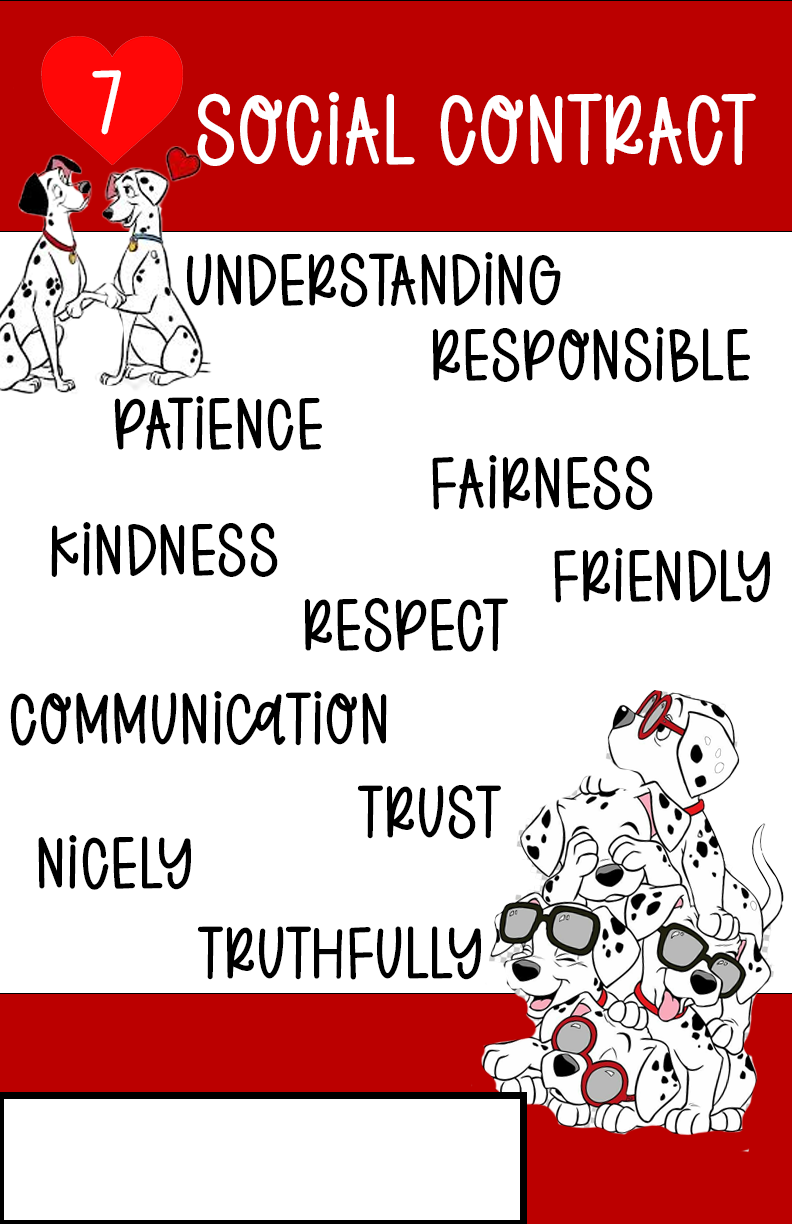
<style>
.page{position:relative;width:792px;height:1224px;background:#ffffff}
.page>*{position:absolute;margin:0}
.t1{font:88.5px "FBCaramelApple";color:#ffffff}
.t2{font:100px "FBCaramelApple";color:#ffffff}
.t3{font:74px "FBCaramelApple";color:#000000}
</style>
<div class="page">
<p class="t1" style="left:92px;top:70px;width:29px;height:65px">7</p>
<p class="t2" style="left:197px;top:92px;width:559px;height:74px">Social Contract</p>
<p class="t3" style="left:187px;top:252px;width:374px;height:55px">Understanding</p>
<p class="t3" style="left:432px;top:327px;width:318px;height:56px">Responsible</p>
<p class="t3" style="left:114px;top:396px;width:208px;height:55px">patience</p>
<p class="t3" style="left:432px;top:455px;width:221px;height:55px">Fairness</p>
<p class="t3" style="left:51px;top:522px;width:227px;height:55px">Kindness</p>
<p class="t3" style="left:554px;top:548px;width:216px;height:55px">friendly</p>
<p class="t3" style="left:304px;top:598px;width:204px;height:54px">Respect</p>
<p class="t3" style="left:10px;top:691px;width:377px;height:55px">Communication</p>
<p class="t3" style="left:357px;top:785px;width:144px;height:54px">Trust</p>
<p class="t3" style="left:38px;top:835px;width:153px;height:55px">nicely</p>
<p class="t3" style="left:197px;top:926px;width:284px;height:54px">truthfully</p>
</div>
